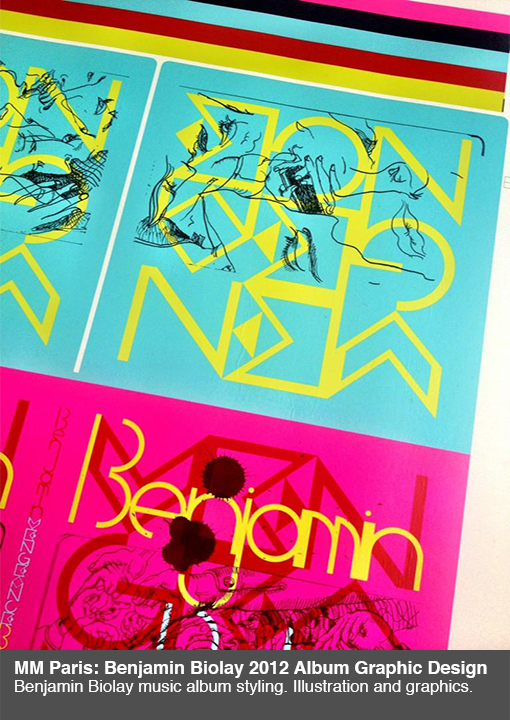
<style>
.page{position:relative;width:510px;height:720px}
.page>*{position:absolute;margin:0}
.t1{font:16.7px/18px "Helvetica";color:#ffffff}
.t2{font:18px/18px "Helvetica-Bold";color:#ffffff}
</style>
<div class="page">
<p class="t1" style="left:15px;top:661px;width:472px;height:35px"><span class="t2">MM Paris: Benjamin Biolay 2012 Album Graphic Design<br></span>Benjamin Biolay music album styling. Illustration and graphics.</p>
</div>
